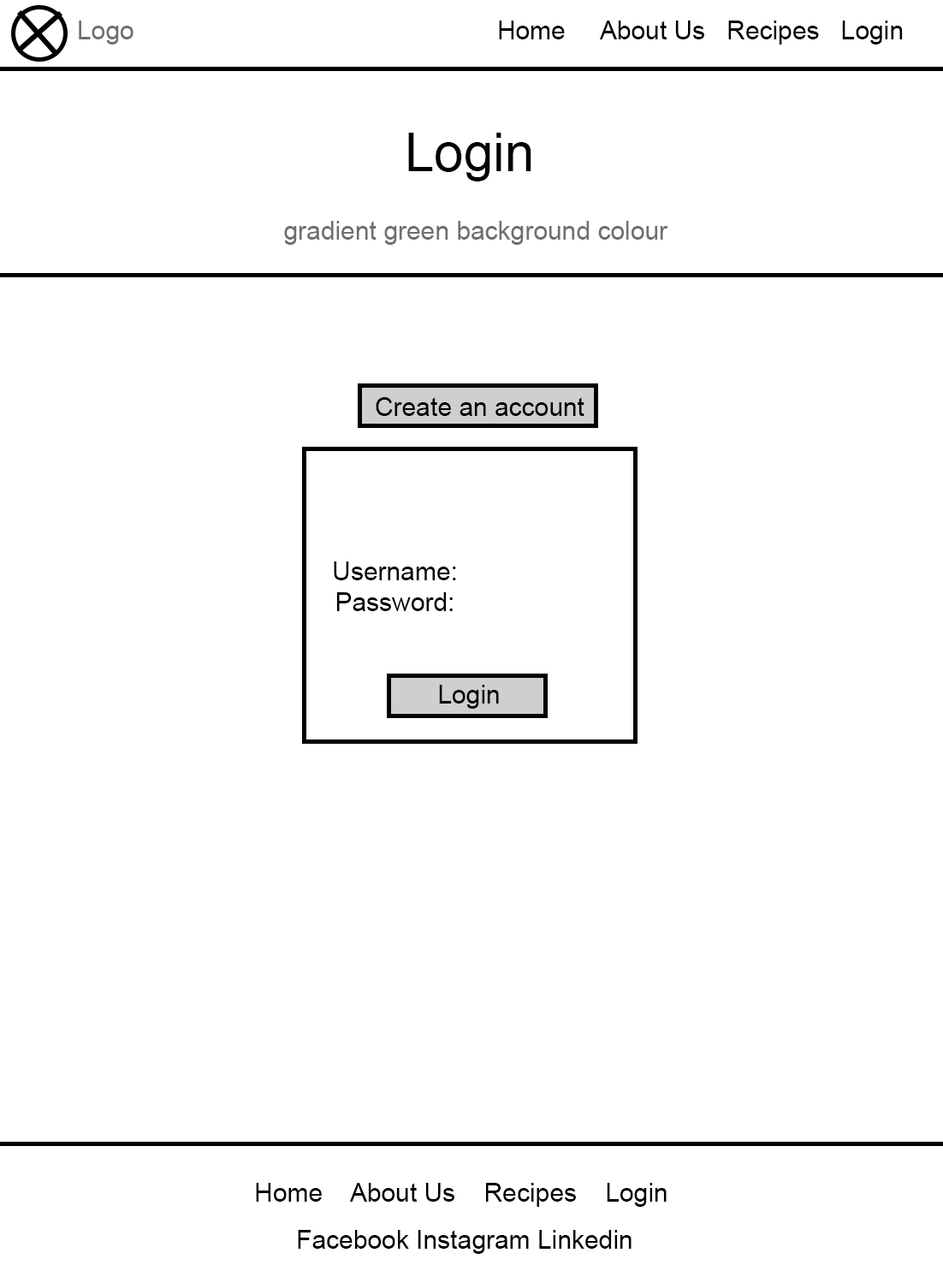
<style>
.page{position:relative;width:943px;height:1265px;background:#ffffff}
.page>*{position:absolute;margin:0}
.t1{font:25.7px "ArialMT";color:#6f6f6f}
.t2{font:25.7px "ArialMT";color:#000000}
.t3{font:53px "ArialMT";color:#000000}
</style>
<div class="page">
<p class="t1" style="left:79px;top:21px;width:54px;height:23px">Logo</p>
<p class="t2" style="left:499px;top:21px;width:404px;height:23px">Home     About Us   Recipes   Login</p>
<p class="t3" style="left:408px;top:133px;width:123px;height:48px">Login</p>
<p class="t1" style="left:284px;top:221px;width:384px;height:24px">gradient green background colour</p>
<p class="t2" style="left:376px;top:397px;width:208px;height:19px">Create an account</p>
<p class="t2" style="left:334px;top:561px;width:122px;height:50px;text-align:center">Username:<br>Password:</p>
<p class="t2" style="left:439px;top:685px;width:60px;height:23px">Login</p>
<p class="t2" style="left:256px;top:1182px;width:411px;height:24px">Home    About Us    Recipes    Login</p>
<p class="t2" style="left:298px;top:1230px;width:333px;height:24px">Facebook Instagram Linkedin</p>
</div>
